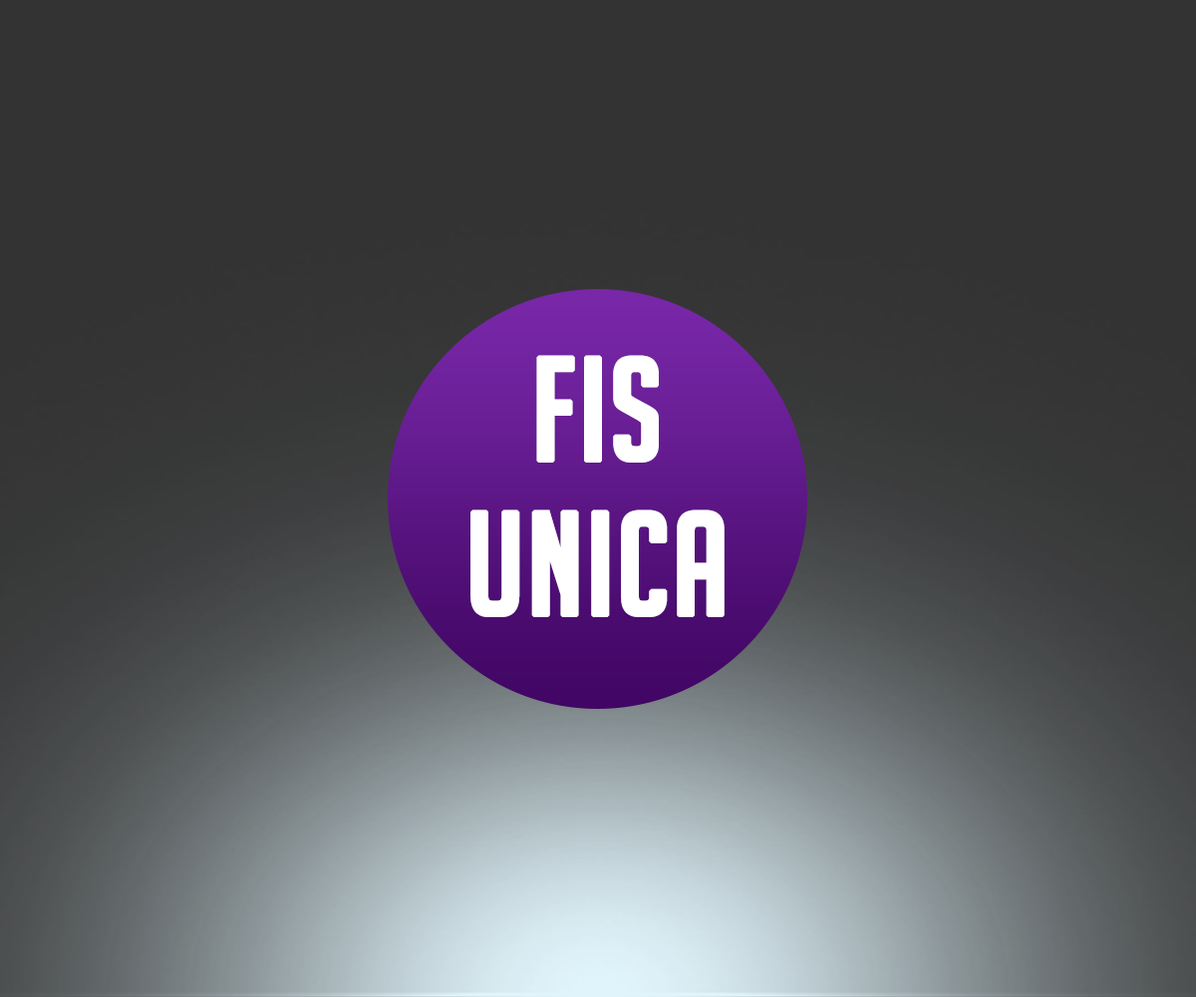
<style>
.page{position:relative;width:1196px;height:997px;background:#333333}
.page>*{position:absolute;margin:0}
.t1{font:143.5px "BigNoodleTitling";color:#ffffff;font-weight:bold}
</style>
<div class="page">
<p class="t1" style="left:536px;top:355px;width:123px;height:108px">fis</p>
<p class="t1" style="left:471px;top:509px;width:254px;height:108px">unica</p>
</div>
